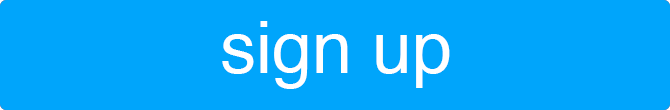
<style>
.page{position:relative;width:670px;height:110px;background:#00a5fb}
.page>*{position:absolute;margin:0}
.t1{font:72px "Helvetica";color:#ffffff}
</style>
<div class="page">
<p class="t1" style="left:222px;top:21px;width:228px;height:68px">sign up</p>
</div>
